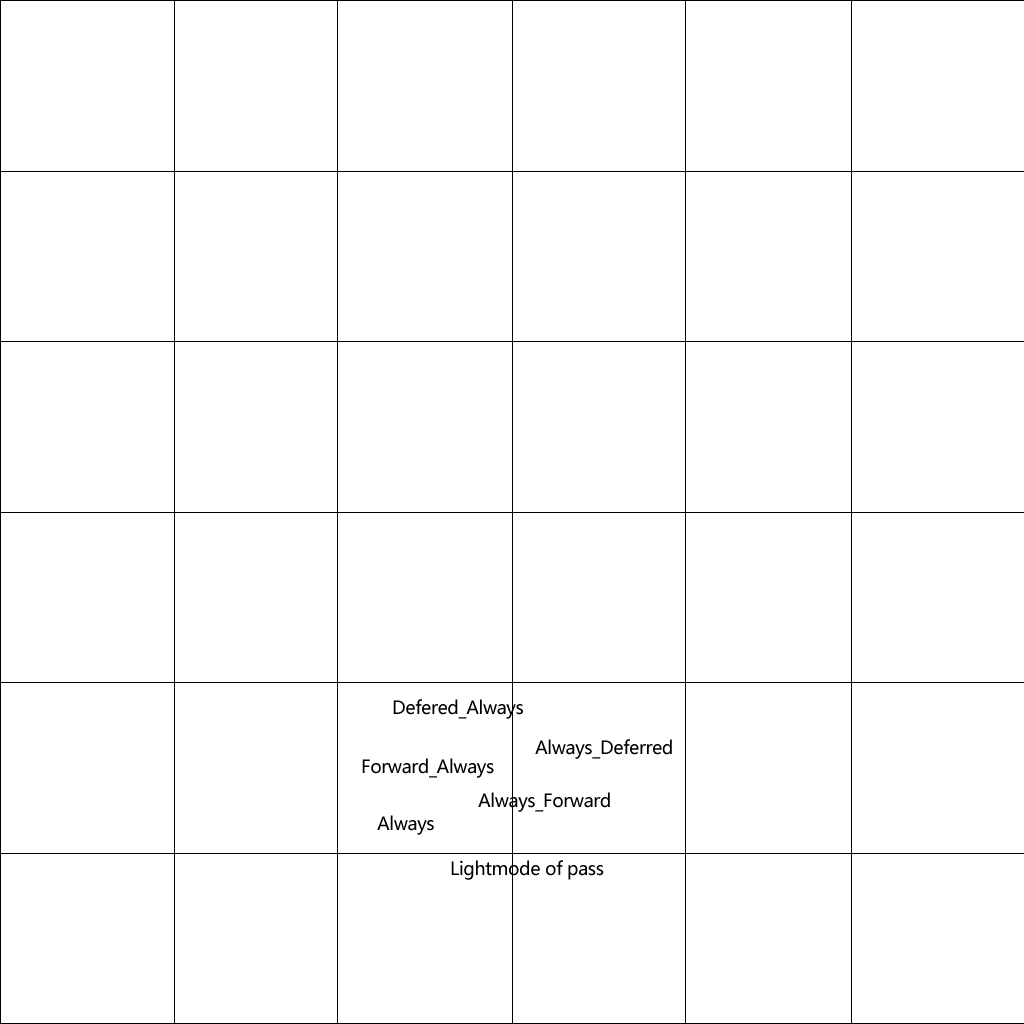
<style>
.page{position:relative;width:1024px;height:1024px;background:#ffffff}
.page>*{position:absolute;margin:0}
.t1{font:18px "MicrosoftYaHei";letter-spacing:-0.02em;color:#000000}
</style>
<div class="page">
<p class="t1" style="left:393px;top:699px;width:130px;height:20px">Defered_Always</p>
<p class="t1" style="left:535px;top:739px;width:137px;height:20px">Always_Deferred</p>
<p class="t1" style="left:362px;top:758px;width:132px;height:20px">Forward_Always</p>
<p class="t1" style="left:478px;top:792px;width:132px;height:20px">Always_Forward</p>
<p class="t1" style="left:377px;top:815px;width:57px;height:20px">Always</p>
<p class="t1" style="left:451px;top:860px;width:153px;height:20px">Lightmode of pass</p>
</div>
